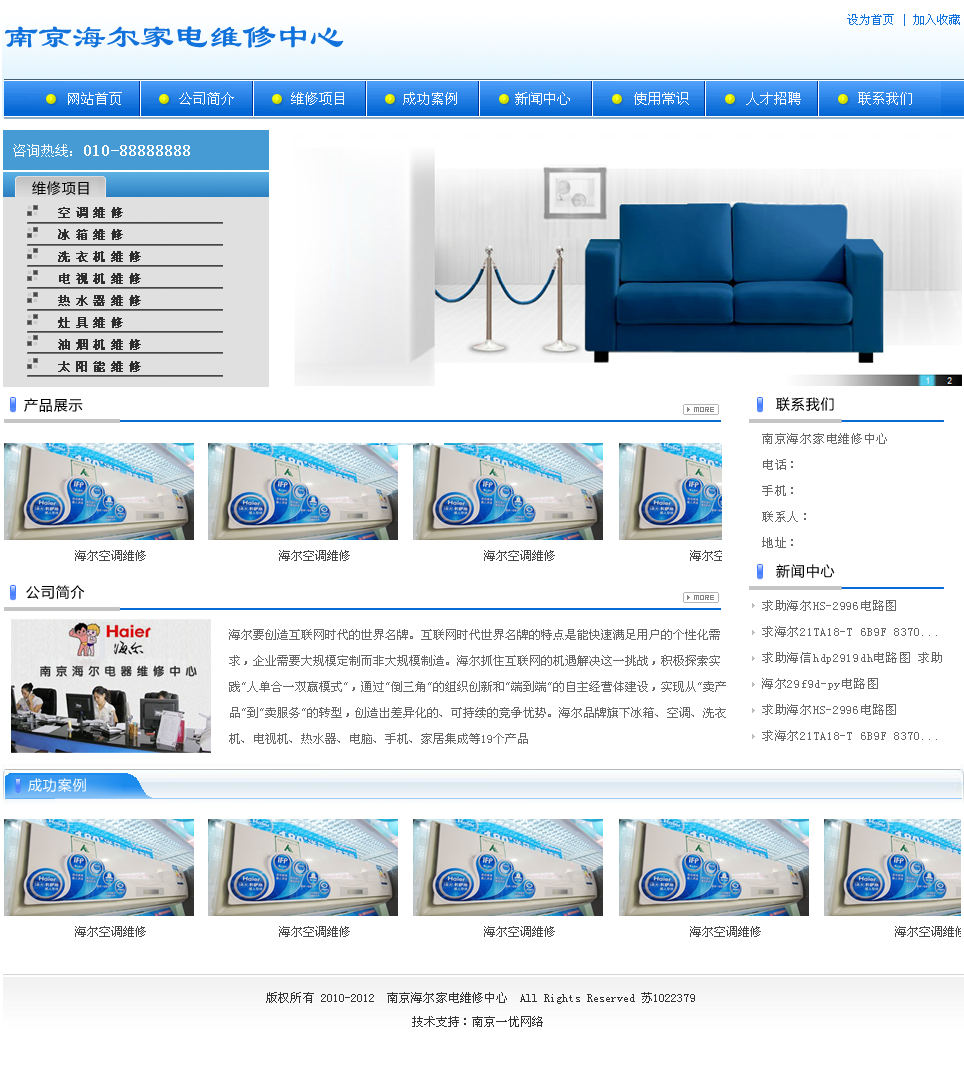
<style>
.page{position:relative;width:964px;height:1076px;background:#ffffff}
.page>*{position:absolute;margin:0}
.t1{font:12px "NSimSun";color:#1272dc}
.t2{font:34px "LS";color:#1272dc}
.t3{font:14px "NSimSun";color:#ffffff}
.t4{font:14px "MicrosoftYaHei";letter-spacing:0.06em;color:#000000}
.t5{font:12px/22px "NSimSun";letter-spacing:0.4em;color:#2e2e2e;font-weight:bold}
.t6{font:12px/26px "NSimSun";letter-spacing:0.06em;color:#676767}
.t7{font:12px/26px "NSimSun";color:#676767}
.t8{font:14px "MicrosoftYaHei";letter-spacing:0.06em;color:#ffffff}
.t9{font:12px/24px "NSimSun";letter-spacing:0.005em;color:#333333}
</style>
<div class="page">
<p class="t1" style="left:847px;top:14px;width:113px;height:12px">设为首页 | 加入收藏</p>
<p class="t2" style="left:5px;top:26px;width:339px;height:22px">南京海尔家电维修中心</p>
<p class="t3" style="left:68px;top:92px;width:844px;height:13px">网站首页        公司简介        维修项目        成功案例        新闻中心         使用常识        人才招聘        联系我们</p>
<p class="t4" style="left:32px;top:181px;width:57px;height:14px">维修项目</p>
<p class="t5" style="left:58px;top:207px;width:83px;height:165px">空调维修<br>冰箱维修<br>洗衣机维修<br>电视机维修<br>热水器维修<br>灶具维修<br>油烟机维修<br>太阳能维修</p>
<p class="t4" style="left:24px;top:398px;width:59px;height:14px">产品展示</p>
<p class="t4" style="left:776px;top:397px;width:58px;height:14px">联系我们</p>
<p class="t6" style="left:762px;top:433px;width:125px;height:115px">南京海尔家电维修中心<br>电话：<br>手机：<br>联系人：<br>地址：</p>
<p class="t4" style="left:776px;top:564px;width:59px;height:14px">新闻中心</p>
<p class="t4" style="left:26px;top:585px;width:59px;height:14px">公司简介</p>
<p class="t6" style="left:762px;top:600px;width:180px;height:141px">求助海尔HS-2996电路图 <br>求海尔21TA18-T 6B9F 8370...<br>求助海信hdp2919dh电路图 求助海尔29f9d-py电路图 <br>求助海尔HS-2996电路图 <br>求海尔21TA18-T 6B9F 8370...<br>求助海信hdp2919dh电路图 求助海尔29f9d-py电路图</p>
<p class="t7" style="left:229px;top:629px;width:497px;height:115px">海尔要创造互联网时代的世界名牌。互联网时代世界名牌的特点是能快速满足用户的个性化需求，企业需要大规模定制而非大规模制造。海尔抓住互联网的机遇解决这一挑战，积极探索实践"人单合一双赢模式"，通过"倒三角"的组织创新和"端到端"的自主经营体建设，实现从"卖产品"到"卖服务"的转型，创造出差异化的、可持续的竞争优势。海尔品牌旗下冰箱、空调、洗衣机、电视机、热水器、电脑、手机、家居集成等19个产品</p>
<p class="t8" style="left:28px;top:778px;width:58px;height:14px">成功案例</p>
<p class="t9" style="left:266px;top:992px;width:429px;height:35px;text-align:center">版权所有 2010-2012  南京海尔家电维修中心  All Rights Reserved 苏1022379 <br>技术支持：南京一优网络</p>
</div>
